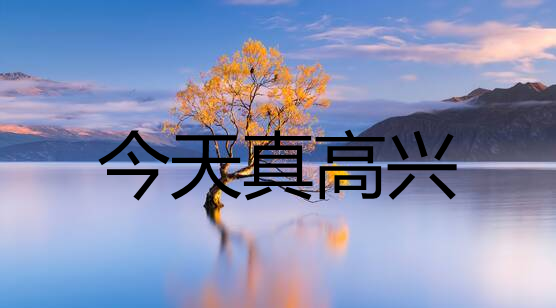
<style>
.page{position:relative;width:556px;height:308px}
.page>*{position:absolute;margin:0}
.t1{font:72px "MicrosoftYaHei";color:#000000}
</style>
<div class="page">
<p class="t1" style="left:98px;top:129px;width:359px;height:72px">今天真高兴</p>
</div>
